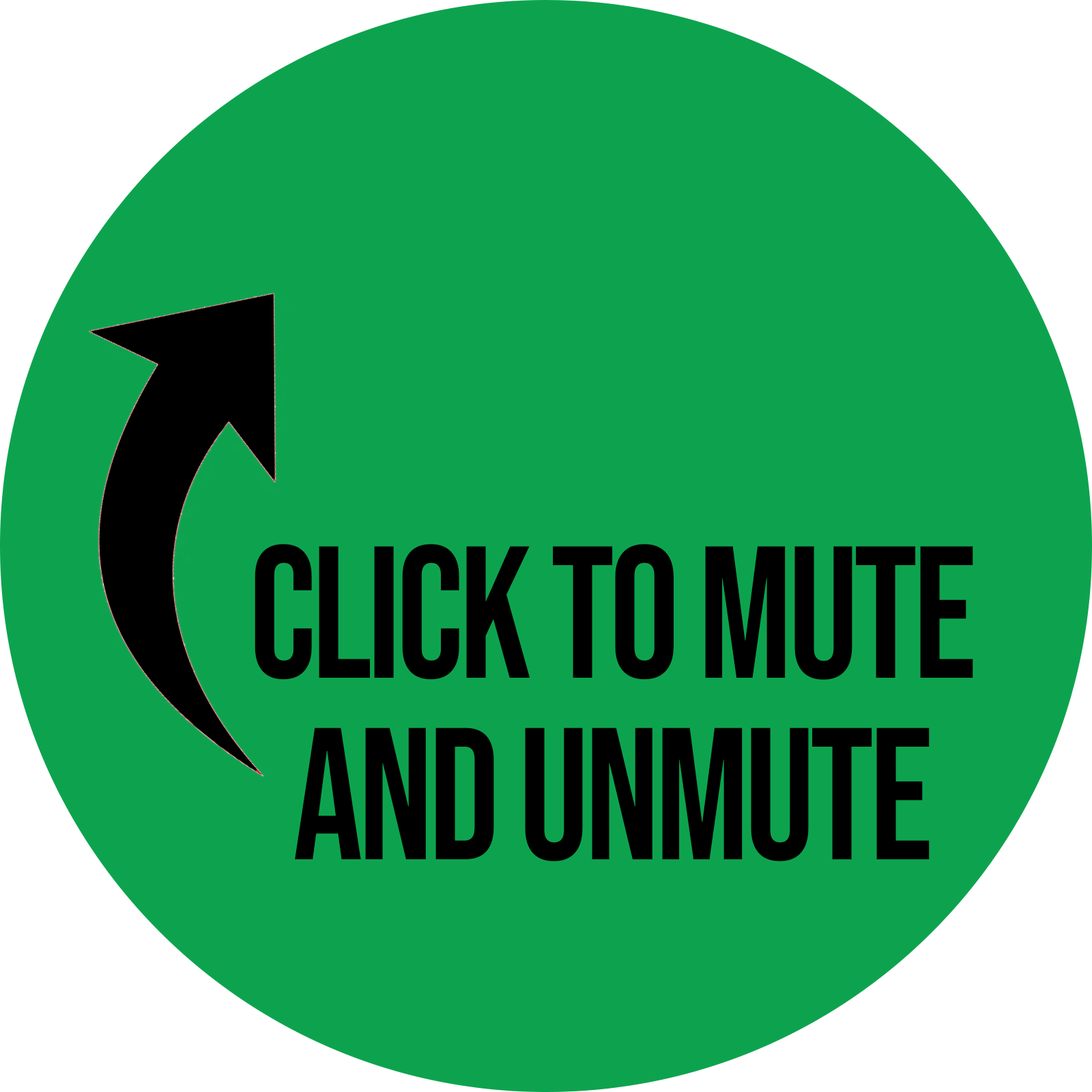
<style>
.page{position:relative;width:1092px;height:1092px;background:#0da34e}
.page>*{position:absolute;margin:0}
.t1{font:187.5px/181.4px "BebasNeue-Regular";letter-spacing:-0.025em;color:#000000;scale:0.93 1}
</style>
<div class="page">
<p class="t1" style="left:255px;top:544px;width:718px;height:317px;text-align:center">Click To mute<br>and unmute</p>
</div>
